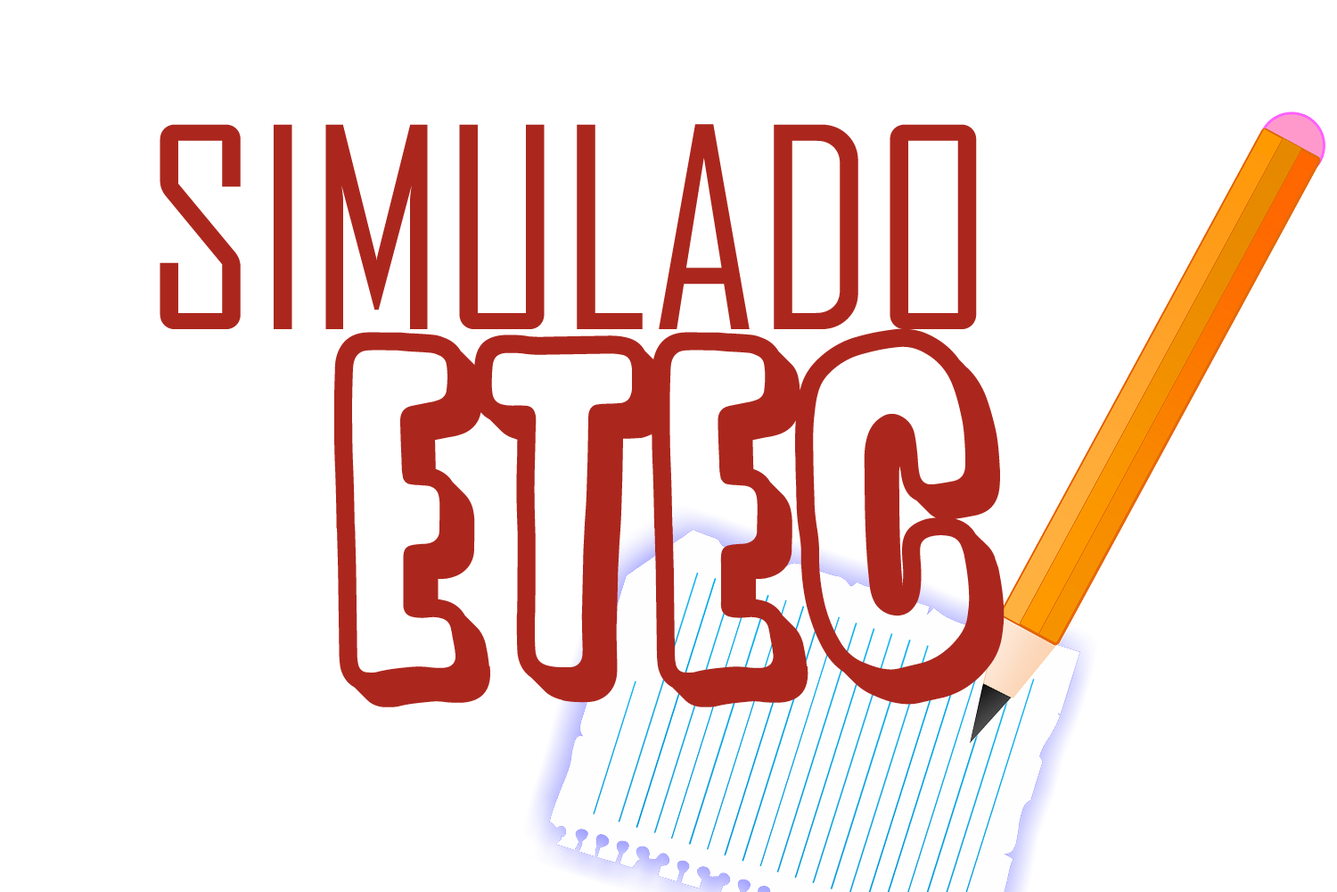
<style>
.page{position:relative;width:1337px;height:892px;background:#ffffff}
.page>*{position:absolute;margin:0}
.t1{font:267.5px "AgencyFB-Reg";color:#ab271e}
.t2{font:356.6px "SugarpunchDEMO";color:#ab271e}
</style>
<div class="page">
<p class="t1" style="left:160px;top:124px;width:817px;height:205px">SIMULADO</p>
<p class="t2" style="left:334px;top:328px;width:671px;height:379px">ETEC</p>
</div>
